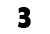
<style>
.page{position:relative;width:50px;height:34px;background:#ffffff}
.page>*{position:absolute;margin:0}
.t1{font:36px "BerlinSansFBDemi-Bold";color:#010000;scale:0.77 1}
</style>
<div class="page">
<p class="t1" style="left:17px;top:7px;width:14px;height:21px">3</p>
</div>
